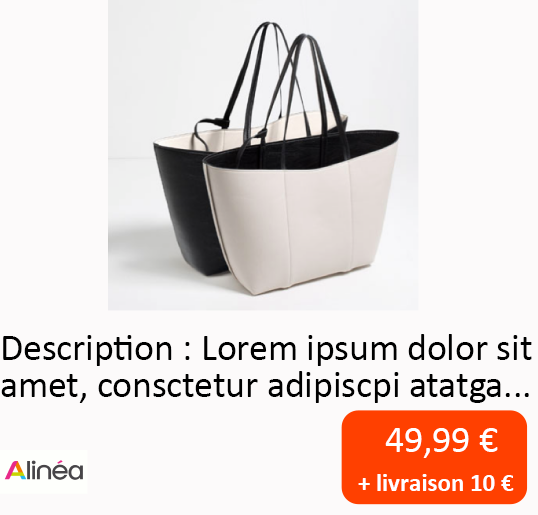
<style>
.page{position:relative;width:538px;height:515px;background:#fcfafa}
.page>*{position:absolute;margin:0}
.t1{font:37.5px "Calibri";color:#000000}
.t2{font:37.5px "Calibri";color:#ffffff}
.t3{font:25px "Calibri-Bold";color:#ffffff}
</style>
<div class="page">
<p class="t1" style="left:1px;top:334px;width:531px;height:69px">Description : Lorem ipsum dolor sit<br>amet, consctetur adipiscpi atatga...</p>
<p class="t2" style="left:385px;top:428px;width:113px;height:30px">49,99 €</p>
<p class="t3" style="left:358px;top:474px;width:156px;height:17px">+ livraison 10 €</p>
</div>
